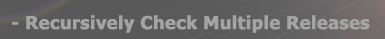
<style>
.page{position:relative;width:385px;height:39px;background:#595959}
.page>*{position:absolute;margin:0}
.t1{font:18px "Tahoma-Bold";color:#a4a4a4;font-weight:bold}
</style>
<div class="page">
<p class="t1" style="left:12px;top:15px;width:358px;height:18px">- Recursively Check Multiple Releases</p>
</div>
